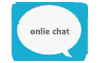
<style>
.page{position:relative;width:100px;height:63px;background:#ffffff}
.page>*{position:absolute;margin:0}
.t1{font:8px "MicrosoftYaHei-Bold";color:#6e7070}
</style>
<div class="page">
<p class="t1" style="left:30px;top:27px;width:40px;height:8px">onlie chat</p>
</div>
